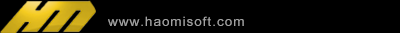
<style>
.page{position:relative;width:400px;height:33px;background:#000000}
.page>*{position:absolute;margin:0}
.t1{font:12.9px "ArialMT";letter-spacing:0.075em;color:#a2a2a2;scale:1.04 1}
</style>
<div class="page">
<p class="t1" style="left:108px;top:16px;width:136px;height:10px">www.haomisoft.com</p>
</div>
